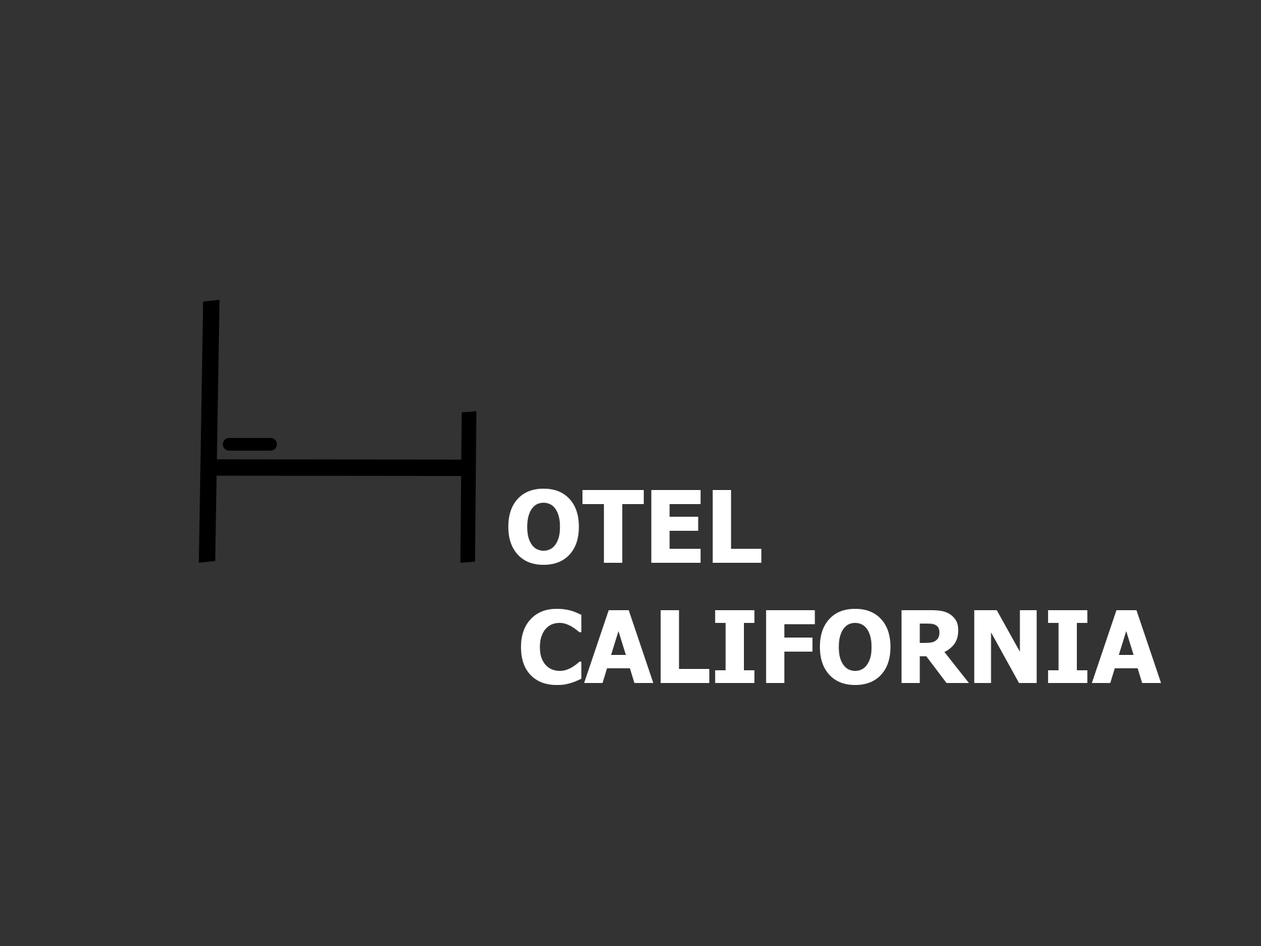
<style>
.page{position:relative;width:1261px;height:946px;background:#333333}
.page>*{position:absolute;margin:0}
.t1{font:100.1px "Tahoma-Bold";color:#ffffff}
</style>
<div class="page">
<p class="t1" style="left:508px;top:488px;width:654px;height:197px;text-align:center">OTEL<br>              CALIFORNIA</p>
</div>
